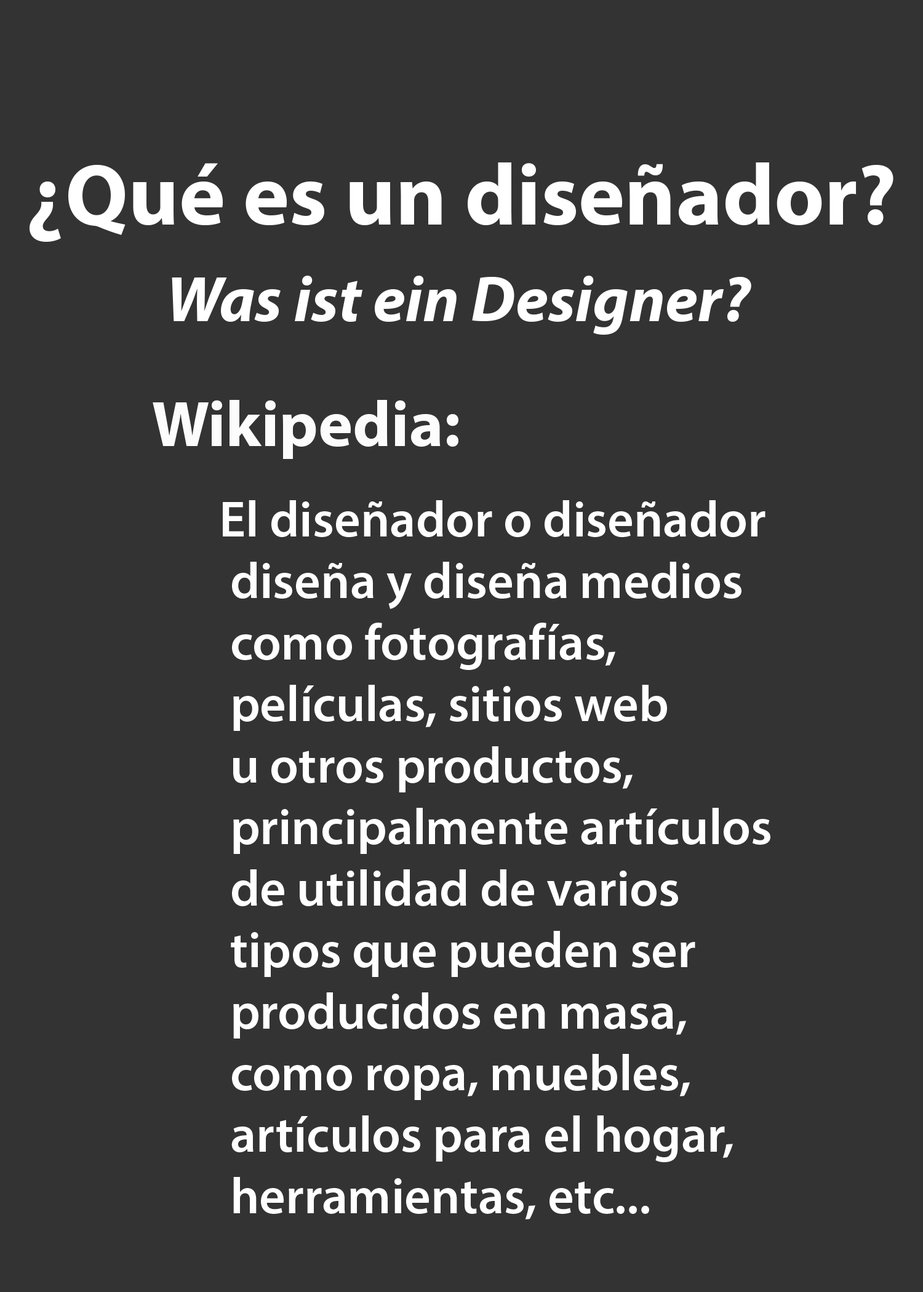
<style>
.page{position:relative;width:923px;height:1292px;background:#333333}
.page>*{position:absolute;margin:0}
.t1{font:87.4px "MyriadPro-Bold";color:#ffffff}
.t2{font:65px "MyriadPro-BoldIt";color:#ffffff}
.t3{font:65px "MyriadPro-Bold";color:#fcfcfc}
.t4{font:51.3px "MyriadPro-Semibold";color:#ffffff}
</style>
<div class="page">
<p class="t1" style="left:30px;top:162px;width:863px;height:80px">¿Qué es un diseñador?</p>
<p class="t2" style="left:172px;top:276px;width:579px;height:59px">Was ist ein Designer?</p>
<p class="t3" style="left:153px;top:400px;width:305px;height:59px">Wikipedia:</p>
<p class="t4" style="left:223px;top:500px;width:547px;height:719px">El diseñador o diseñador<br> diseña y diseña medios<br> como fotografías,<br> películas, sitios web<br> u otros productos,<br> principalmente artículos<br> de utilidad de varios<br> tipos que pueden ser<br> producidos en masa,<br> como ropa, muebles,<br> artículos para el hogar,<br> herramientas, etc...</p>
</div>
